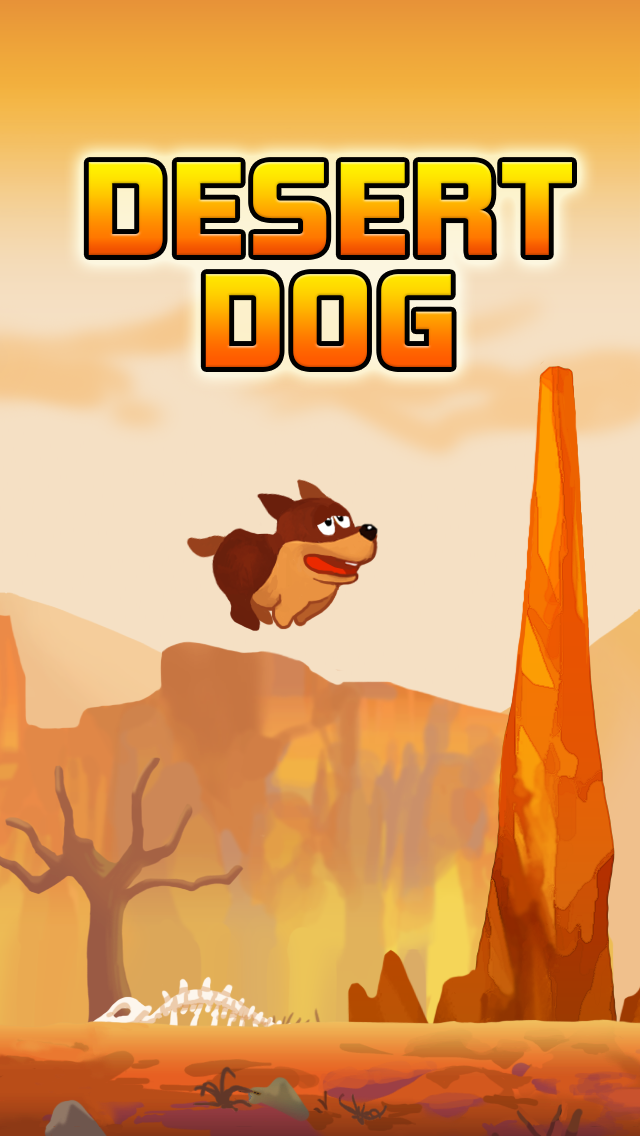
<style>
.page{position:relative;width:640px;height:1136px}
.page>*{position:absolute;margin:0}
.t1{font:122px/112px "KimberleyBl-Regular";letter-spacing:0.025em;scale:1.1 1}
</style>
<div class="page">
<p class="t1" style="left:88px;top:162px;width:484px;height:205px;text-align:center">DESERT<br>DOG</p>
</div>
